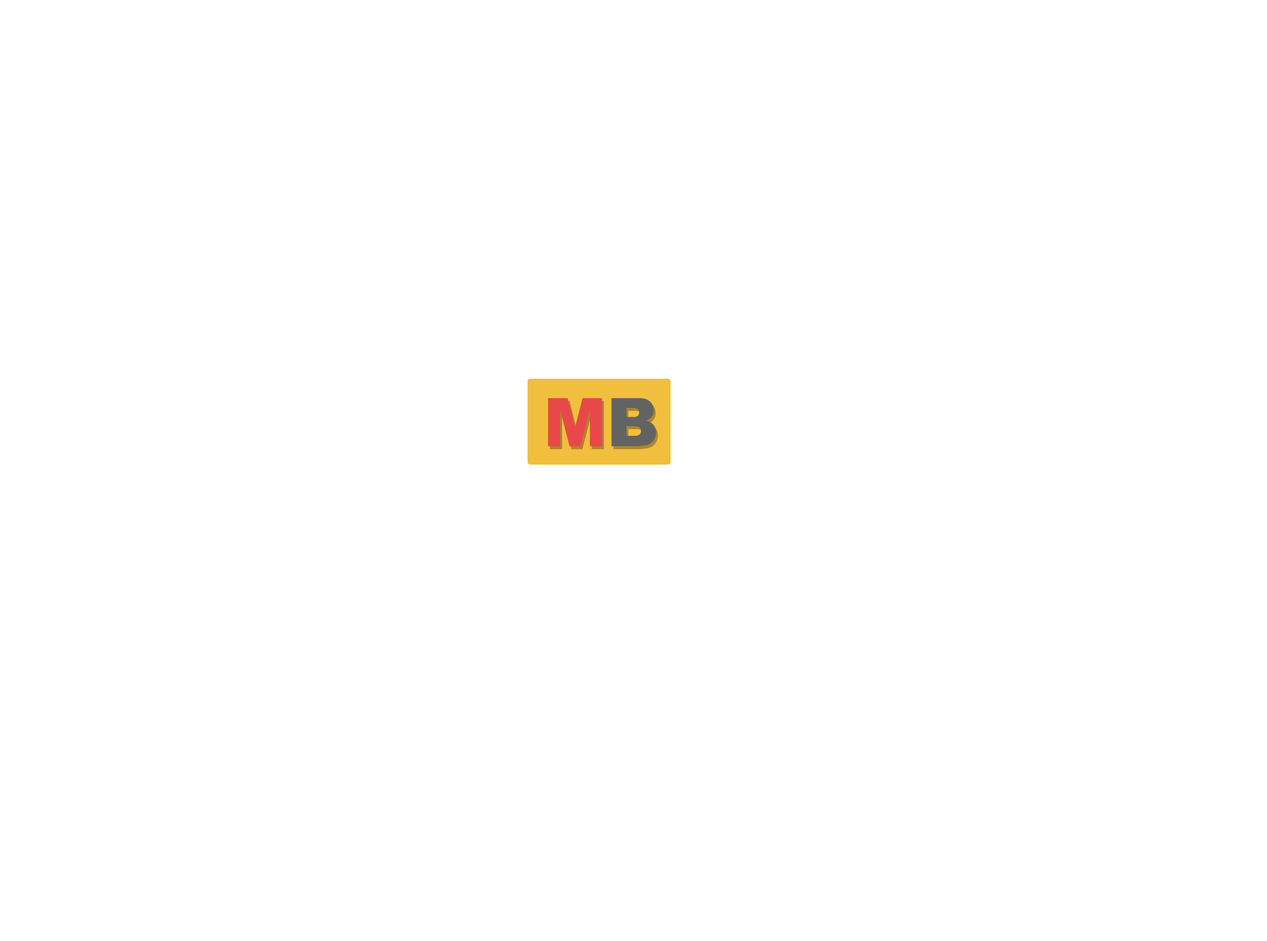
<style>
.page{position:relative;width:1267px;height:941px;background:#ffffff}
.page>*{position:absolute;margin:0}
.t1{font:67.1px "Arial-Black";color:#e84849}
.t2{font:67.1px "Arial-Black";color:#626463}
</style>
<div class="page">
<p class="t1" style="left:548px;top:398px;width:108px;height:48px">M<span class="t2">B</span></p>
</div>
